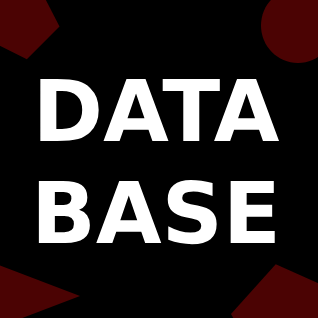
<style>
.page{position:relative;width:318px;height:318px;background:#000000}
.page>*{position:absolute;margin:0}
.t1{font:85px "DejaVuSans-Bold";color:#ffffff}
</style>
<div class="page">
<p class="t1" style="left:38px;top:79px;width:242px;height:166px;text-align:center">DATA<br>BASE</p>
</div>
